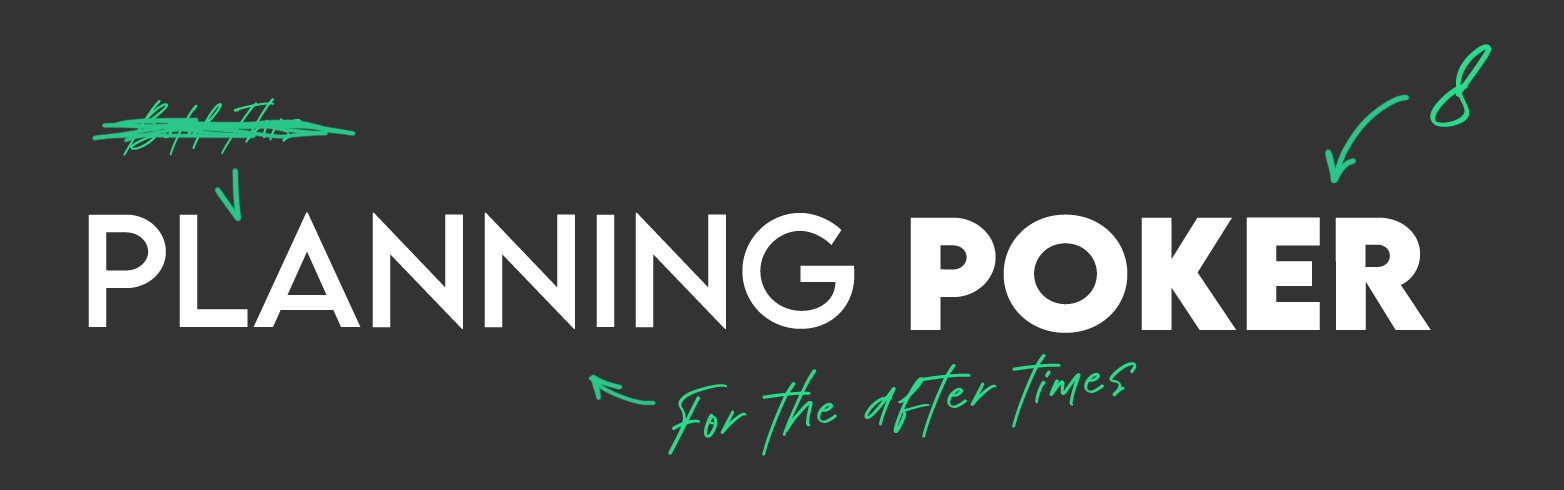
<style>
.page{position:relative;width:1564px;height:490px;background:#333333}
.page>*{position:absolute;margin:0}
.t1{font:148.2px "Outshine";color:#26de8a}
.t2{font:67.5px "Outshine"}
.t3{font:142.6px "LEMONMILK-Regular";color:#ffffff}
.t4{font:142.6px "LEMONMILK-Bold";color:#ffffff}
.t5{font:95px "Outshine";color:#26de8a}
</style>
<div class="page">
<p class="t1" style="left:1430px;top:44px;width:62px;height:83px">8</p>
<p class="t2" style="left:123px;top:98px;width:179px;height:58px">Bold This</p>
<p class="t3" style="left:88px;top:212px;width:767px;height:117px">Planning</p>
<p class="t4" style="left:910px;top:214px;width:521px;height:119px">Poker</p>
<p class="t5" style="left:668px;top:354px;width:469px;height:102px;rotate:-6deg">For the after times</p>
</div>
